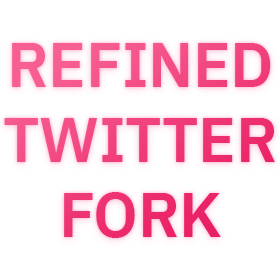
<style>
.page{position:relative;width:280px;height:280px;background:#ffffff}
.page>*{position:absolute;margin:0}
.t1{font:62.5px "IBMPlexSans-SemiBold"}
</style>
<div class="page">
<p class="t1" style="left:4px;top:43px;width:271px;height:195px;text-align:center">REFINED<br>TWITTER<br>FORK</p>
</div>
